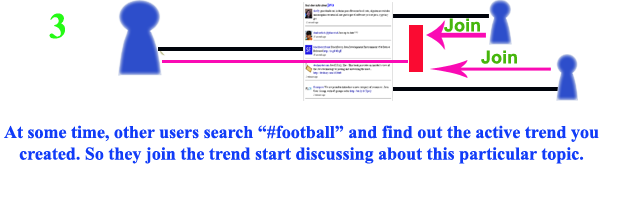
<style>
.page{position:relative;width:624px;height:200px;background:#ffffff}
.page>*{position:absolute;margin:0}
.t1{font:18px "Arial-BoldMT";color:#46b60c}
.t2{font:18px "TimesNewRomanPS-BoldMT";color:#113cf8}
</style>
<div class="page">
<p class="t1" style="left:444px;top:18px;width:36px;height:14px">Join</p>
<p class="t1" style="left:481px;top:50px;width:36px;height:14px">Join</p>
<p class="t2" style="left:4px;top:125px;width:595px;height:39px;text-align:center">At some time, other users search “#football” and find out the active trend you created. So they join the trend start discussing about this particular topic.</p>
</div>
